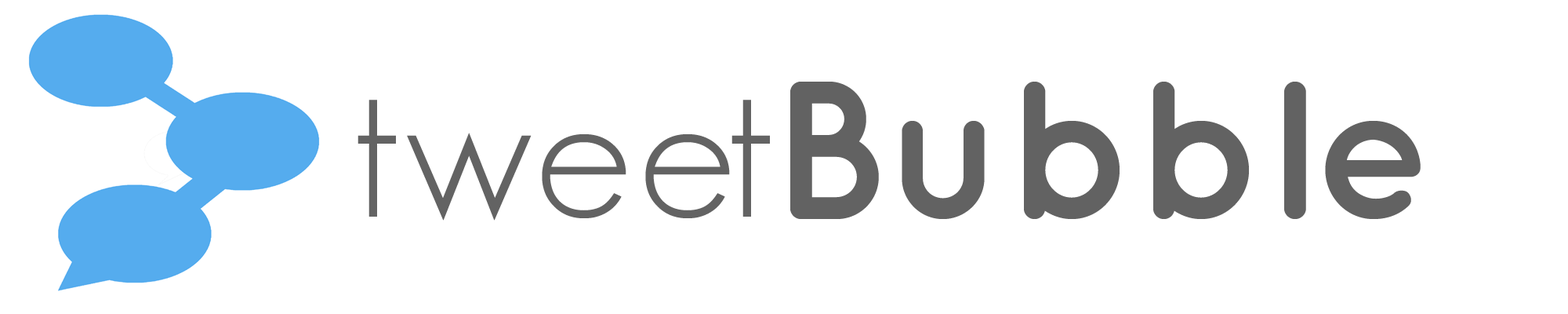
<style>
.page{position:relative;width:1568px;height:314px;background:#ffffff}
.page>*{position:absolute;margin:0}
.t1{font:196px "QuicksandBold-Regular";color:#626262}
.t2{font:196px "GeosansLight";color:#636363}
</style>
<div class="page">
<p class="t1" style="left:790px;top:82px;width:631px;height:137px">Bubble</p>
<p class="t2" style="left:358px;top:100px;width:412px;height:120px">tweet</p>
</div>
